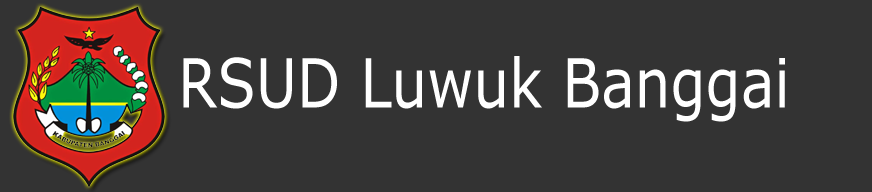
<style>
.page{position:relative;width:872px;height:192px;background:#333333}
.page>*{position:absolute;margin:0}
.t1{font:67.7px "Verdana";color:#ffffff;scale:0.83 1}
</style>
<div class="page">
<p class="t1" style="left:183px;top:56px;width:602px;height:66px">RSUD Luwuk Banggai</p>
</div>
